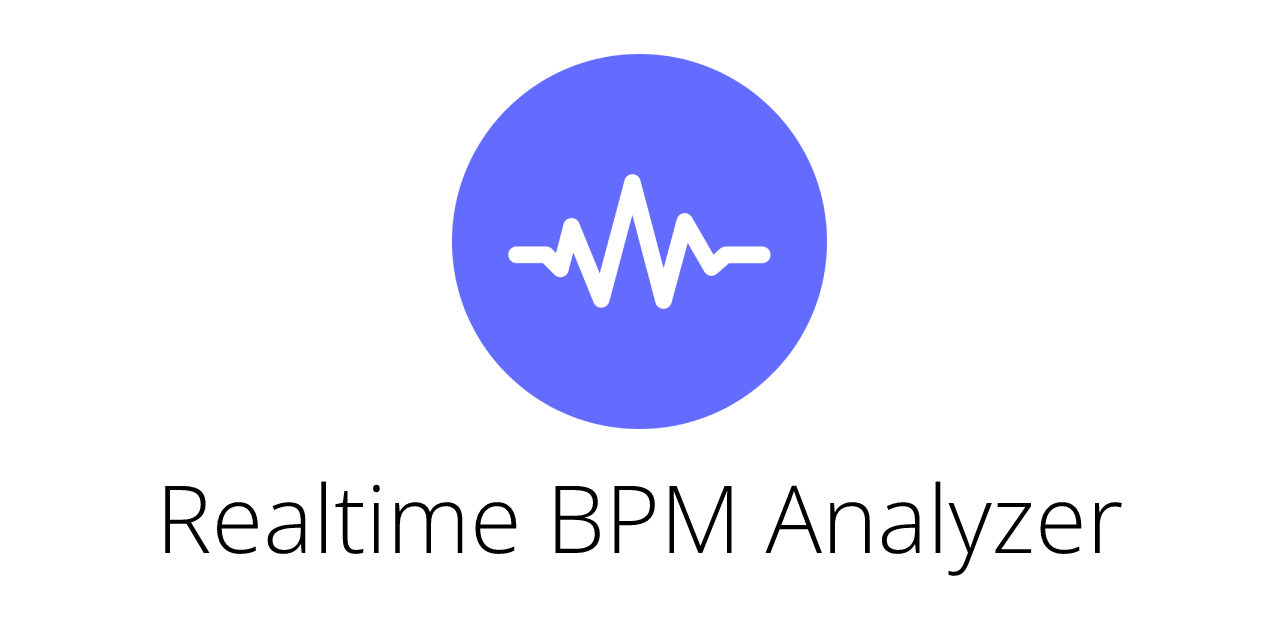
<style>
.page{position:relative;width:1280px;height:640px;background:#ffffff}
.page>*{position:absolute;margin:0}
.t1{font:94px "OpenSans-Light";color:#000000}
</style>
<div class="page">
<p class="t1" style="left:165px;top:481px;width:957px;height:95px">Realtime BPM Analyzer</p>
</div>
